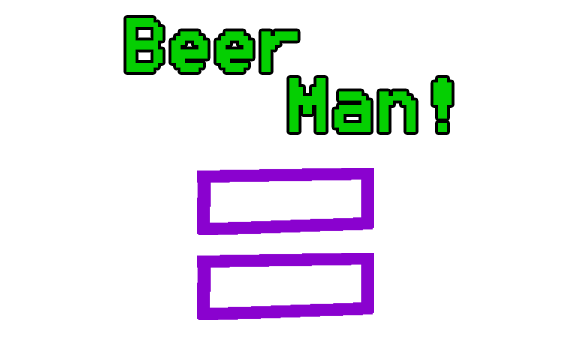
<style>
.page{position:relative;width:570px;height:359px;background:#ffffff}
.page>*{position:absolute;margin:0}
.t1{font:96px "8514oem";color:#05cf02}
</style>
<div class="page">
<p class="t1" style="left:126px;top:18px;width:172px;height:54px">Beer</p>
<p class="t1" style="left:289px;top:78px;width:163px;height:54px">Man!</p>
</div>
